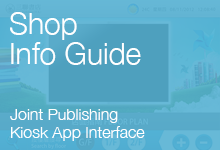
<style>
.page{position:relative;width:220px;height:150px;background:#4ea0be}
.page>*{position:absolute;margin:0}
.t1{font:30px/30px "HelveticaNeue-Light";color:#ffffff}
.t2{font:16px/18px "HelveticaNeue-Light";color:#ffffff}
</style>
<div class="page">
<p class="t1" style="left:10px;top:12px;width:131px;height:53px">Shop<br>Info Guide</p>
<p class="t2" style="left:10px;top:109px;width:135px;height:32px">Joint Publishing<br>Kiosk App Interface</p>
</div>
